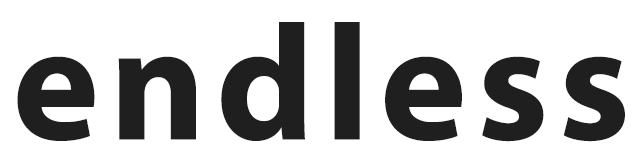
<style>
.page{position:relative;width:640px;height:160px;background:#ffffff}
.page>*{position:absolute;margin:0}
.t1{font:165.2px "MyriadHebrew-Bold";letter-spacing:0.06em;color:#1f1f1f}
</style>
<div class="page">
<p class="t1" style="left:17px;top:22px;width:608px;height:120px">endless</p>
</div>
